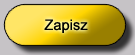
<style>
.page{position:relative;width:135px;height:55px}
.page>*{position:absolute;margin:0}
.t1{font:14.7px "ArialMT";color:#000000}
</style>
<div class="page">
<p class="t1" style="left:44px;top:19px;width:44px;height:14px">Zapisz</p>
</div>
